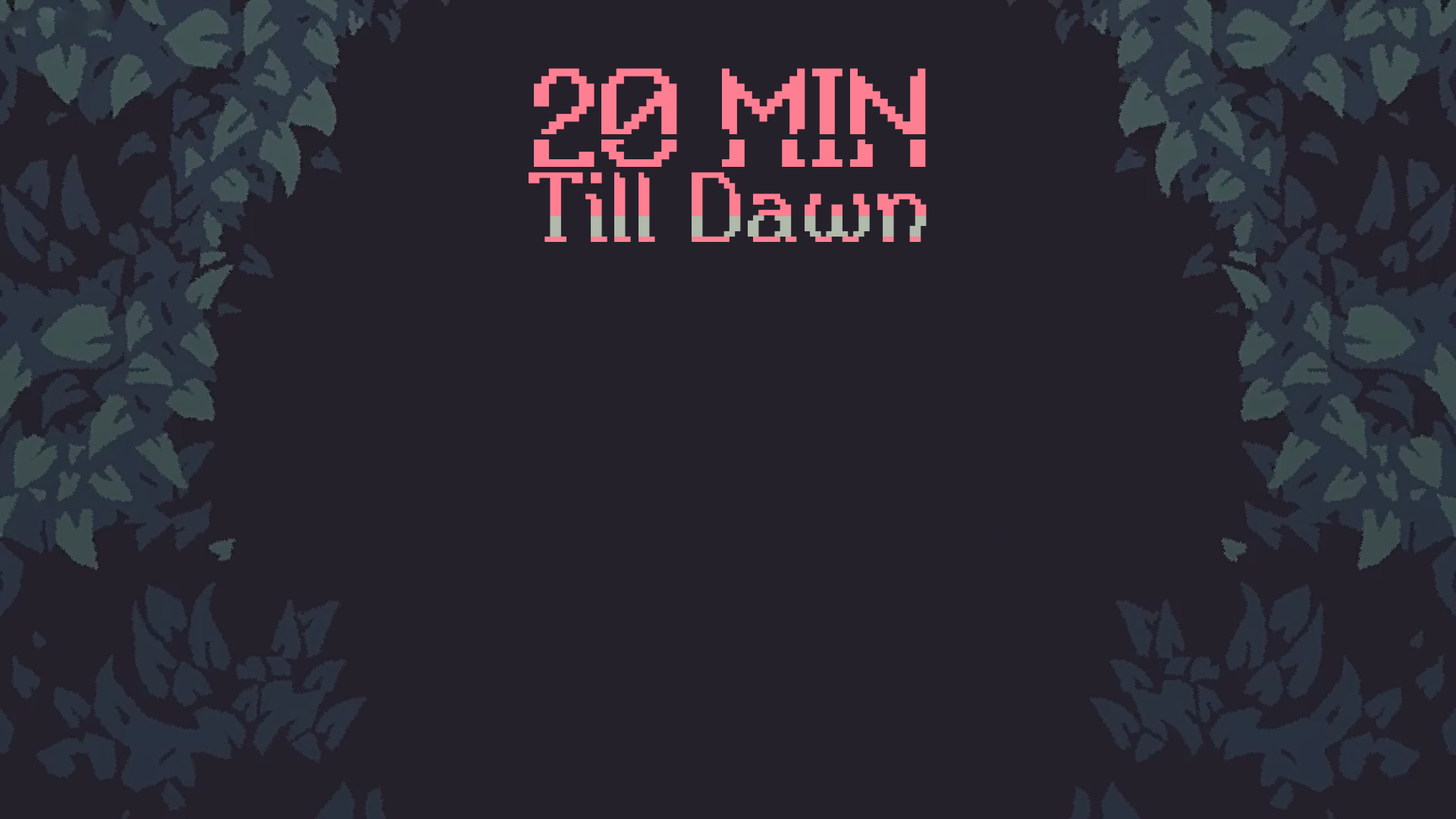
<style>
.page{position:relative;width:1456px;height:819px;background:#25212b}
.page>*{position:absolute;margin:0}
.t1{font:128.4px "ChevyRay---Lantern";color:#ff7f92;text-transform:uppercase}
.t2{font:90.8px "ChevyRay---Lantern";letter-spacing:0.025em;color:#ff7f92}
</style>
<div class="page">
<p class="t1" style="left:534px;top:68px;width:392px;height:99px">20 Min</p>
<p class="t2" style="left:529px;top:172px;width:398px;height:70px">Till Dawn</p>
</div>
